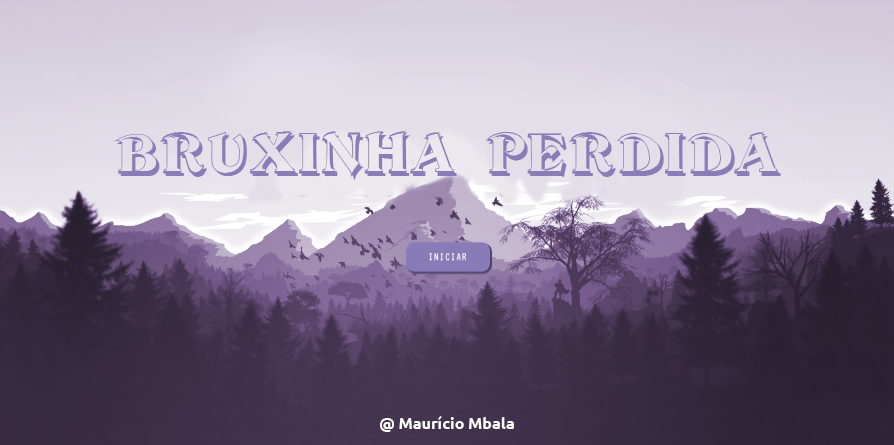
<style>
.page{position:relative;width:894px;height:445px}
.page>*{position:absolute;margin:0}
.t1{font:51.9px "DevinneSwashShadow";color:#897cb7}
.t2{font:15.9px "Ubuntu-Bold";color:#ffffff}
</style>
<div class="page">
<p class="t1" style="left:114px;top:131px;width:667px;height:49px">BRUXINHA PERDIDA</p>
<p class="t2" style="left:380px;top:416px;width:134px;height:16px">@ Maurício Mbala</p>
</div>
